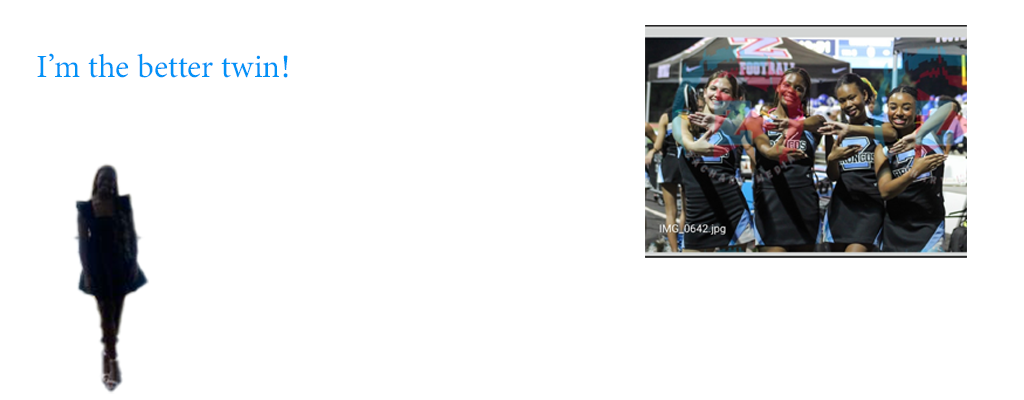
<style>
.page{position:relative;width:1024px;height:400px;background:#ffffff}
.page>*{position:absolute;margin:0}
.t1{font:32.4px "MinionVariableConcept-Roman";color:#0192f7}
</style>
<div class="page">
<p class="t1" style="left:37px;top:53px;width:251px;height:25px">I’m the better twin!</p>
</div>
